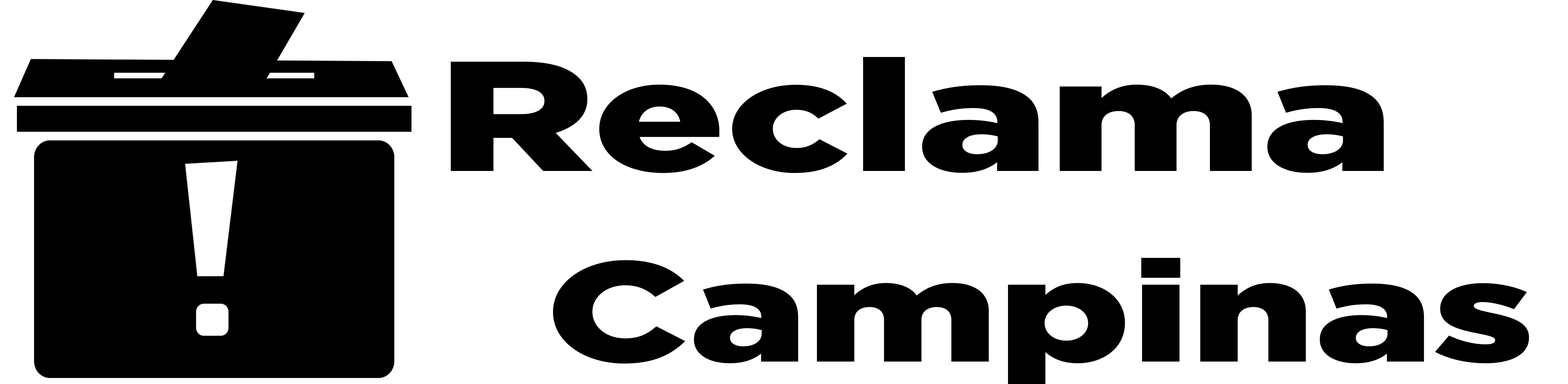
<style>
.page{position:relative;width:1568px;height:384px;background:#ffffff}
.page>*{position:absolute;margin:0}
.t1{font:156.1px "Gotham-Black";color:#000000;scale:1.41 1}
.t2{font:142px "Gotham-Black";color:#000000;scale:1.39 1}
</style>
<div class="page">
<p class="t1" style="left:450px;top:57px;width:934px;height:116px">Reclama</p>
<p class="t2" style="left:553px;top:258px;width:976px;height:127px">Campinas</p>
</div>
